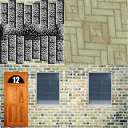
<style>
.page{position:relative;width:128px;height:128px}
.page>*{position:absolute;margin:0}
.t1{font:8px "Impact";color:#ffffff}
</style>
<div class="page">
<p class="t1" style="left:12px;top:76px;width:8px;height:7px">12</p>
</div>
